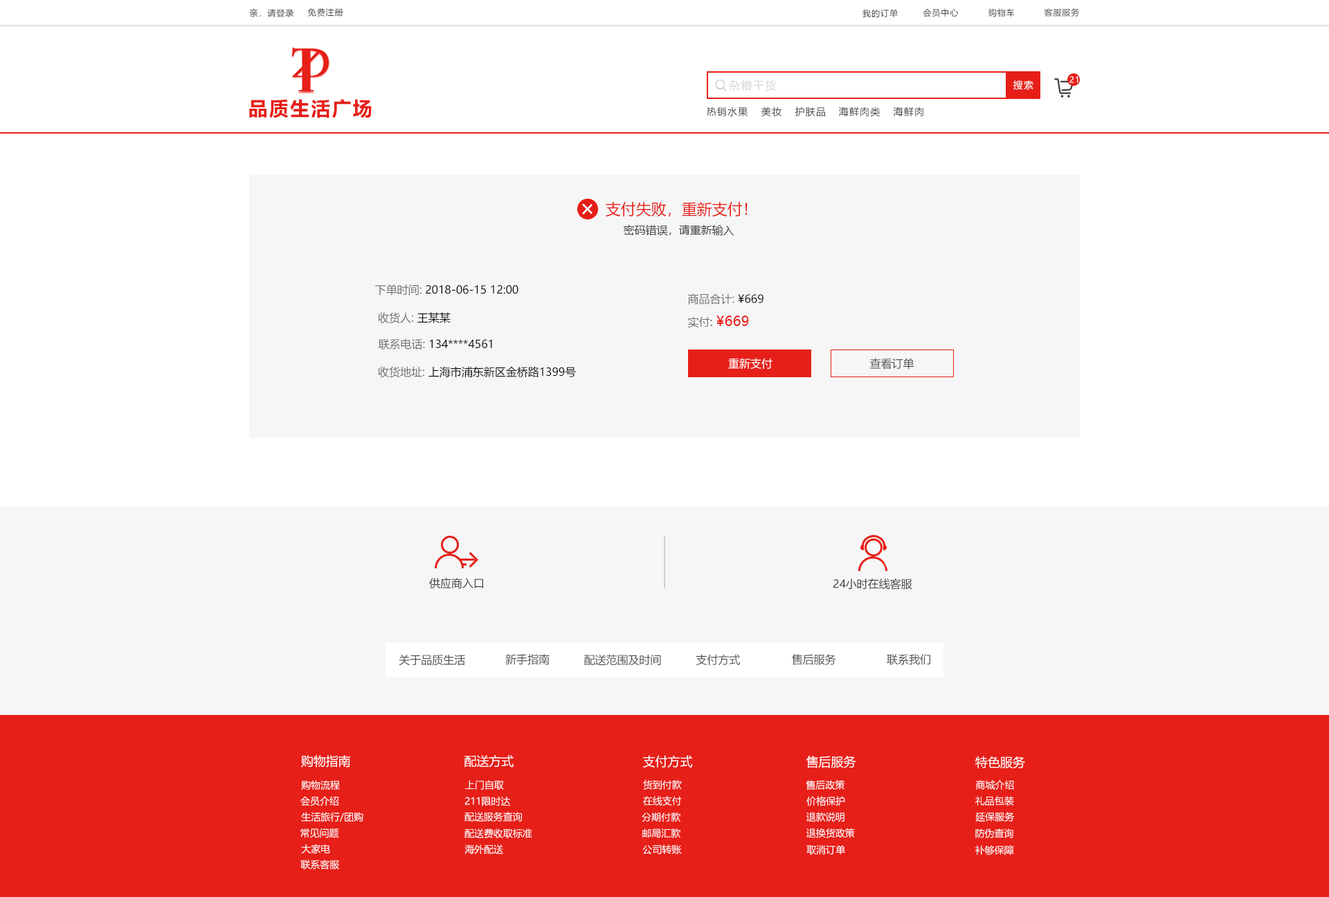
<style>
.page{position:relative;width:1329px;height:897px;background:#f6f6f6}
.page>*{position:absolute;margin:0}
.t1{font:8.3px "MicrosoftYaHei";letter-spacing:0.08em;color:#404040}
.t2{font:8.3px "MicrosoftYaHei";letter-spacing:0.08em;color:#ffffff}
.t3{font:11.1px "MicrosoftYaHei";letter-spacing:0.08em;color:#d6d6d6}
.t4{font:9.7px "MicrosoftYaHei";letter-spacing:0.08em;color:#ffffff}
.t5{font:19.4px "MicrosoftYaHei-Bold";letter-spacing:0.08em;color:#e61f18}
.t6{font:9.7px "MicrosoftYaHei";letter-spacing:0.08em;color:#404040}
.t7{font:15.2px "MicrosoftYaHei";color:#e61f18}
.t8{font:11.1px "MicrosoftYaHei";color:#474747}
.t9{font:11.1px "MicrosoftYaHei";color:#101010}
.t10{font:11.1px "MicrosoftYaHei";color:#717171}
.t11{font:13.8px "MicrosoftYaHei";color:#e61f18}
.t12{font:11.1px "MicrosoftYaHei";color:#ffffff}
.t13{font:11.1px "MicrosoftYaHei";color:#515151}
.t14{font:11.1px "MicrosoftYaHei";color:#404040}
.t15{font:11.1px "MicrosoftYaHei";color:#505050}
.t16{font:12.5px "MicrosoftYaHei";color:#ffffff}
.t17{font:9.7px "MicrosoftYaHei";color:#ffffff}
</style>
<div class="page">
<p class="t1" style="left:249px;top:8px;width:45px;height:9px">亲，请登录</p>
<p class="t1" style="left:307px;top:8px;width:36px;height:9px">免费注册</p>
<p class="t1" style="left:863px;top:9px;width:35px;height:8px">我的订单</p>
<p class="t1" style="left:923px;top:8px;width:36px;height:9px">会员中心</p>
<p class="t1" style="left:989px;top:8px;width:26px;height:9px">购物车</p>
<p class="t1" style="left:1044px;top:8px;width:36px;height:9px">客服服务</p>
<p class="t2" style="left:1070px;top:76px;width:9px;height:7px">21</p>
<p class="t3" style="left:729px;top:80px;width:47px;height:11px">杂粮干货</p>
<p class="t4" style="left:1013px;top:80px;width:21px;height:10px">搜索</p>
<p class="t5" style="left:249px;top:99px;width:123px;height:19px">品质生活广场</p>
<p class="t6" style="left:707px;top:107px;width:41px;height:10px">热销水果</p>
<p class="t6" style="left:761px;top:107px;width:21px;height:9px">美妆</p>
<p class="t6" style="left:795px;top:107px;width:30px;height:10px">护肤品</p>
<p class="t6" style="left:838px;top:107px;width:43px;height:10px">海鲜肉类</p>
<p class="t6" style="left:893px;top:107px;width:30px;height:10px">海鲜肉</p>
<p class="t7" style="left:606px;top:201px;width:142px;height:16px">支付失败，重新支付！</p>
<p class="t8" style="left:624px;top:225px;width:110px;height:10px">密码错误，请重新输入</p>
<p class="t9" style="left:375px;top:284px;width:143px;height:12px"><span class="t10">下单时间: </span>2018-06-15 12:00</p>
<p class="t10" style="left:687px;top:294px;width:77px;height:11px">商品合计: <span class="t9">¥669</span></p>
<p class="t10" style="left:378px;top:312px;width:73px;height:11px">收货人: <span class="t9">王某某</span></p>
<p class="t11" style="left:688px;top:316px;width:61px;height:11px"><span class="t10">实付: </span>¥669</p>
<p class="t9" style="left:378px;top:339px;width:114px;height:11px"><span class="t10">联系电话: </span>134****4561</p>
<p class="t12" style="left:728px;top:358px;width:45px;height:11px">重新支付</p>
<p class="t13" style="left:869px;top:358px;width:45px;height:12px">查看订单</p>
<p class="t9" style="left:378px;top:366px;width:198px;height:12px"><span class="t10">收货地址: </span>上海市浦东新区金桥路1399号</p>
<p class="t14" style="left:429px;top:577px;width:54px;height:12px">供应商入口</p>
<p class="t14" style="left:833px;top:578px;width:79px;height:12px">24小时在线客服</p>
<p class="t15" style="left:505px;top:653px;width:45px;height:12px">新手指南</p>
<p class="t15" style="left:399px;top:654px;width:66px;height:12px">关于品质生活</p>
<p class="t15" style="left:584px;top:654px;width:77px;height:12px">配送范围及时间</p>
<p class="t15" style="left:696px;top:654px;width:45px;height:11px">支付方式</p>
<p class="t15" style="left:792px;top:654px;width:44px;height:11px">售后服务</p>
<p class="t15" style="left:887px;top:654px;width:43px;height:11px">联系我们</p>
<p class="t16" style="left:301px;top:755px;width:49px;height:13px">购物指南</p>
<p class="t16" style="left:465px;top:755px;width:49px;height:13px">配送方式</p>
<p class="t16" style="left:643px;top:755px;width:50px;height:13px">支付方式</p>
<p class="t16" style="left:806px;top:755px;width:50px;height:13px">售后服务</p>
<p class="t16" style="left:975px;top:756px;width:50px;height:13px">特色服务</p>
<p class="t17" style="left:301px;top:780px;width:39px;height:10px">购物流程</p>
<p class="t17" style="left:465px;top:780px;width:39px;height:10px">上门自取</p>
<p class="t17" style="left:643px;top:780px;width:39px;height:10px">货到付款</p>
<p class="t17" style="left:806px;top:780px;width:39px;height:10px">售后政策</p>
<p class="t17" style="left:975px;top:780px;width:39px;height:10px">商城介绍</p>
<p class="t17" style="left:300px;top:796px;width:39px;height:10px">会员介绍</p>
<p class="t17" style="left:465px;top:796px;width:46px;height:10px">211限时达</p>
<p class="t17" style="left:643px;top:796px;width:39px;height:10px">在线支付</p>
<p class="t17" style="left:806px;top:796px;width:39px;height:10px">价格保护</p>
<p class="t17" style="left:975px;top:796px;width:39px;height:10px">礼品包装</p>
<p class="t17" style="left:301px;top:812px;width:62px;height:10px">生活旅行/团购</p>
<p class="t17" style="left:465px;top:812px;width:57px;height:10px">配送服务查询</p>
<p class="t17" style="left:642px;top:812px;width:38px;height:10px">分期付款</p>
<p class="t17" style="left:806px;top:812px;width:39px;height:10px">退款说明</p>
<p class="t17" style="left:975px;top:812px;width:40px;height:10px">延保服务</p>
<p class="t17" style="left:300px;top:829px;width:39px;height:9px">常见问题</p>
<p class="t17" style="left:465px;top:829px;width:67px;height:9px">配送费收取标准</p>
<p class="t17" style="left:642px;top:829px;width:38px;height:9px">邮局汇款</p>
<p class="t17" style="left:806px;top:828px;width:49px;height:10px">退换货政策</p>
<p class="t17" style="left:975px;top:829px;width:38px;height:9px">防伪查询</p>
<p class="t17" style="left:301px;top:844px;width:29px;height:10px">大家电</p>
<p class="t17" style="left:465px;top:845px;width:38px;height:9px">海外配送</p>
<p class="t17" style="left:642px;top:845px;width:40px;height:10px">公司转账</p>
<p class="t17" style="left:806px;top:845px;width:39px;height:10px">取消订单</p>
<p class="t17" style="left:975px;top:845px;width:39px;height:11px">补够保障</p>
<p class="t17" style="left:300px;top:860px;width:39px;height:9px">联系客服</p>
</div>
